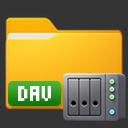
<style>
.page{position:relative;width:128px;height:128px;background:#333333}
.page>*{position:absolute;margin:0}
.t1{font:18px "Mini-Pixel";color:#ffffff}
</style>
<div class="page">
<p class="t1" style="left:18px;top:86px;width:33px;height:15px">DAV</p>
</div>
